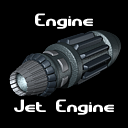
<style>
.page{position:relative;width:128px;height:128px;background:#000000}
.page>*{position:absolute;margin:0}
.t1{font:18px "GravitateBRK";color:#ffffff}
</style>
<div class="page">
<p class="t1" style="left:35px;top:13px;width:58px;height:16px">Engine</p>
<p class="t1" style="left:14px;top:99px;width:100px;height:16px">Jet Engine</p>
</div>
